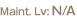
<style>
.page{position:relative;width:77px;height:20px;background:#ffffff}
.page>*{position:absolute;margin:0}
.t1{font:12px "GothicMB101Pro-DeBold";letter-spacing:-0.04em;color:#8b6e51}
.t2{font:10px "GothicMB101Pro-DeBold";letter-spacing:-0.04em;color:#8b6e51}
</style>
<div class="page">
<p class="t1" style="left:52px;top:5px;width:24px;height:11px;opacity:0.9">N/A</p>
<p class="t2" style="left:0px;top:7px;width:49px;height:9px;opacity:0.9">Maint. Lv:</p>
</div>
